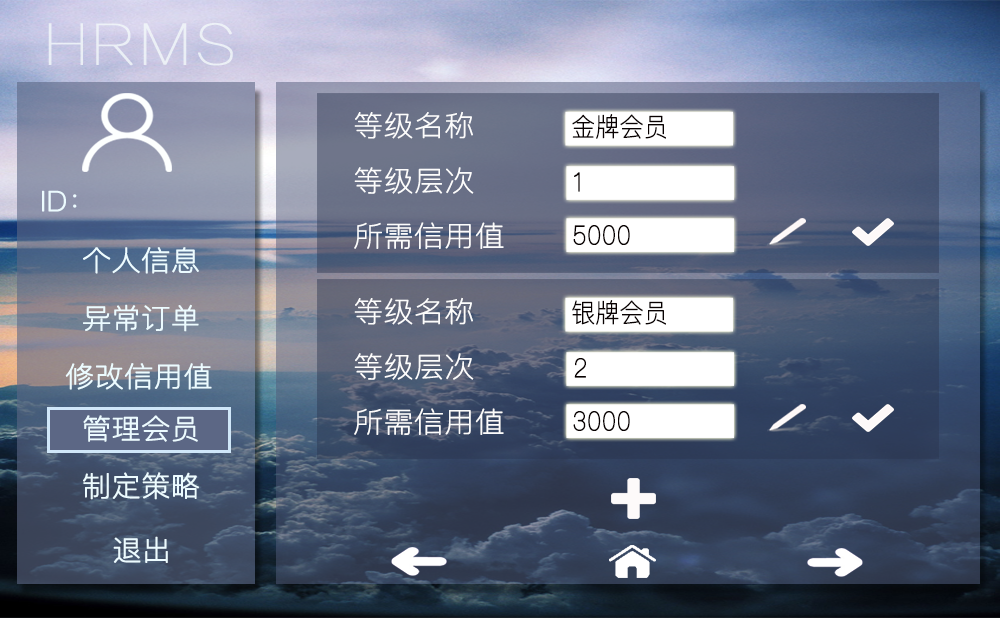
<style>
.page{position:relative;width:1000px;height:618px}
.page>*{position:absolute;margin:0}
.t1{font:28.1px "PingFangSC-Ultralight";color:#fcfcfc;font-weight:bold;scale:1.05 1}
.t2{font:25.9px "PingFangSC-Ultralight";color:#080101;font-weight:bold;scale:0.91 1}
.t3{font:27.8px "PingFangSC-Thin";color:#ecfbff;font-weight:bold;scale:1.04 1}
</style>
<div class="page">
<p class="t1" style="left:354px;top:111px;width:119px;height:28px">等级名称</p>
<p class="t2" style="left:572px;top:114px;width:94px;height:25px">金牌会员</p>
<p class="t1" style="left:354px;top:167px;width:120px;height:27px">等级层次</p>
<p class="t2" style="left:574px;top:172px;width:6px;height:20px">1</p>
<p class="t3" style="left:42px;top:190px;width:35px;height:22px">ID：</p>
<p class="t1" style="left:354px;top:222px;width:150px;height:27px">所需信用值</p>
<p class="t2" style="left:573px;top:225px;width:57px;height:20px">5000</p>
<p class="t3" style="left:83px;top:247px;width:116px;height:27px">个人信息</p>
<p class="t3" style="left:83px;top:304px;width:116px;height:28px">异常订单</p>
<p class="t1" style="left:354px;top:297px;width:119px;height:28px">等级名称</p>
<p class="t2" style="left:572px;top:300px;width:94px;height:25px">银牌会员</p>
<p class="t1" style="left:354px;top:353px;width:120px;height:27px">等级层次</p>
<p class="t3" style="left:65px;top:363px;width:147px;height:27px">修改信用值</p>
<p class="t2" style="left:574px;top:358px;width:12px;height:20px">2</p>
<p class="t1" style="left:354px;top:408px;width:150px;height:27px">所需信用值</p>
<p class="t2" style="left:573px;top:411px;width:57px;height:20px">3000</p>
<p class="t3" style="left:83px;top:415px;width:115px;height:27px">管理会员</p>
<p class="t3" style="left:83px;top:472px;width:116px;height:28px">制定策略</p>
<p class="t3" style="left:113px;top:536px;width:55px;height:27px">退出</p>
</div>
